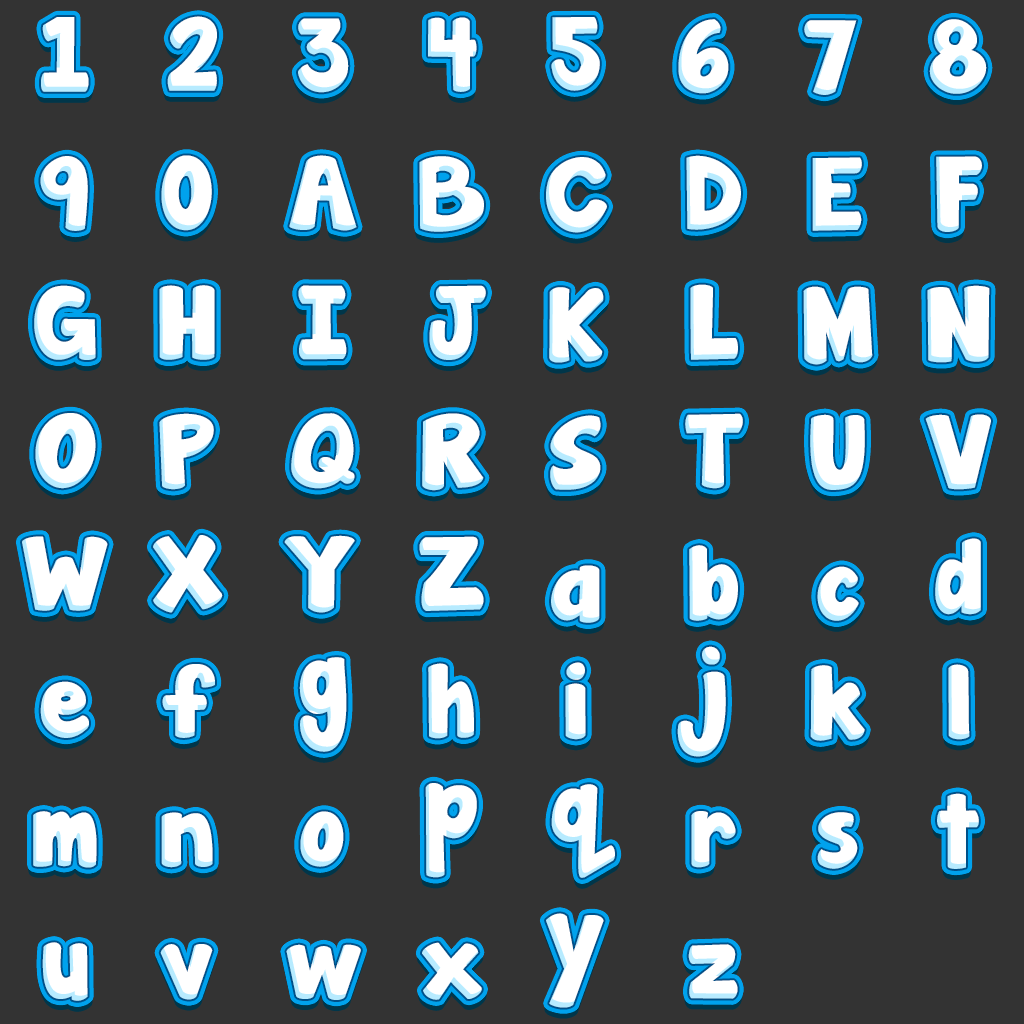
<style>
.page{position:relative;width:1024px;height:1024px;background:#333333}
.page>*{position:absolute;margin:0}
.t1{font:93.3px "JandaManateeSolid";color:#ffffff;text-transform:uppercase;scale:1.05 1}
.t2{font:93.3px "JandaManateeSolid";color:#ffffff;scale:1.05 1}
.t3{font:92px "JandaManateeSolid";color:#ffffff;scale:1.05 1}
</style>
<div class="page">
<p class="t1" style="left:41px;top:17px;width:48px;height:75px">1</p>
<p class="t1" style="left:167px;top:16px;width:50px;height:75px">2</p>
<p class="t1" style="left:428px;top:17px;width:49px;height:75px">4</p>
<p class="t1" style="left:551px;top:17px;width:49px;height:74px">5</p>
<p class="t1" style="left:298px;top:18px;width:51px;height:75px">3</p>
<p class="t1" style="left:678px;top:19px;width:51px;height:75px">6</p>
<p class="t1" style="left:804px;top:20px;width:53px;height:75px">7</p>
<p class="t1" style="left:929px;top:19px;width:58px;height:75px">8</p>
<p class="t1" style="left:40px;top:156px;width:48px;height:75px">9</p>
<p class="t1" style="left:161px;top:155px;width:51px;height:76px">0</p>
<p class="t2" style="left:289px;top:155px;width:68px;height:76px">A</p>
<p class="t2" style="left:419px;top:156px;width:65px;height:76px">B</p>
<p class="t2" style="left:546px;top:157px;width:61px;height:76px">C</p>
<p class="t2" style="left:686px;top:155px;width:55px;height:75px">D</p>
<p class="t2" style="left:812px;top:157px;width:50px;height:74px">E</p>
<p class="t2" style="left:936px;top:156px;width:46px;height:76px">F</p>
<p class="t2" style="left:34px;top:285px;width:62px;height:75px">G</p>
<p class="t2" style="left:159px;top:285px;width:56px;height:75px">H</p>
<p class="t2" style="left:298px;top:285px;width:49px;height:75px">I</p>
<p class="t2" style="left:429px;top:285px;width:57px;height:75px">J</p>
<p class="t2" style="left:549px;top:287px;width:55px;height:76px">K</p>
<p class="t2" style="left:690px;top:284px;width:48px;height:76px">L</p>
<p class="t2" style="left:803px;top:286px;width:70px;height:79px">M</p>
<p class="t2" style="left:927px;top:285px;width:63px;height:78px">N</p>
<p class="t2" style="left:35px;top:413px;width:61px;height:76px">O</p>
<p class="t2" style="left:159px;top:413px;width:55px;height:77px">P</p>
<p class="t2" style="left:291px;top:413px;width:64px;height:76px">Q</p>
<p class="t2" style="left:422px;top:413px;width:62px;height:78px">R</p>
<p class="t2" style="left:685px;top:413px;width:58px;height:76px">T</p>
<p class="t2" style="left:810px;top:414px;width:55px;height:76px">U</p>
<p class="t2" style="left:925px;top:414px;width:66px;height:76px">V</p>
<p class="t2" style="left:550px;top:415px;width:51px;height:75px">S</p>
<p class="t2" style="left:22px;top:536px;width:86px;height:75px">W</p>
<p class="t2" style="left:153px;top:535px;width:70px;height:78px">X</p>
<p class="t2" style="left:284px;top:535px;width:71px;height:78px">Y</p>
<p class="t2" style="left:419px;top:536px;width:65px;height:75px">Z</p>
<p class="t2" style="left:689px;top:545px;width:49px;height:76px">b</p>
<p class="t2" style="left:935px;top:538px;width:46px;height:77px">d</p>
<p class="t2" style="left:551px;top:565px;width:49px;height:58px">a</p>
<p class="t2" style="left:817px;top:566px;width:42px;height:55px">c</p>
<p class="t3" style="left:677px;top:646px;width:49px;height:111px">j</p>
<p class="t2" style="left:162px;top:664px;width:53px;height:74px">f</p>
<p class="t2" style="left:299px;top:657px;width:48px;height:95px">g</p>
<p class="t2" style="left:428px;top:663px;width:46px;height:76px">h</p>
<p class="t2" style="left:565px;top:662px;width:21px;height:78px">i</p>
<p class="t2" style="left:810px;top:665px;width:55px;height:76px">k</p>
<p class="t2" style="left:948px;top:664px;width:22px;height:76px">l</p>
<p class="t2" style="left:40px;top:681px;width:49px;height:57px">e</p>
<p class="t2" style="left:425px;top:783px;width:52px;height:95px">p</p>
<p class="t2" style="left:551px;top:784px;width:64px;height:94px">q</p>
<p class="t2" style="left:937px;top:793px;width:42px;height:76px">t</p>
<p class="t2" style="left:33px;top:811px;width:64px;height:57px">m</p>
<p class="t2" style="left:161px;top:812px;width:52px;height:56px">n</p>
<p class="t2" style="left:300px;top:811px;width:44px;height:56px">o</p>
<p class="t2" style="left:691px;top:811px;width:45px;height:57px">r</p>
<p class="t2" style="left:817px;top:812px;width:41px;height:57px">s</p>
<p class="t2" style="left:546px;top:913px;width:58px;height:95px">y</p>
<p class="t2" style="left:42px;top:942px;width:46px;height:59px">u</p>
<p class="t2" style="left:422px;top:942px;width:60px;height:58px">x</p>
<p class="t2" style="left:160px;top:944px;width:53px;height:56px">v</p>
<p class="t2" style="left:286px;top:944px;width:75px;height:56px">w</p>
<p class="t2" style="left:688px;top:944px;width:50px;height:55px">z</p>
</div>
